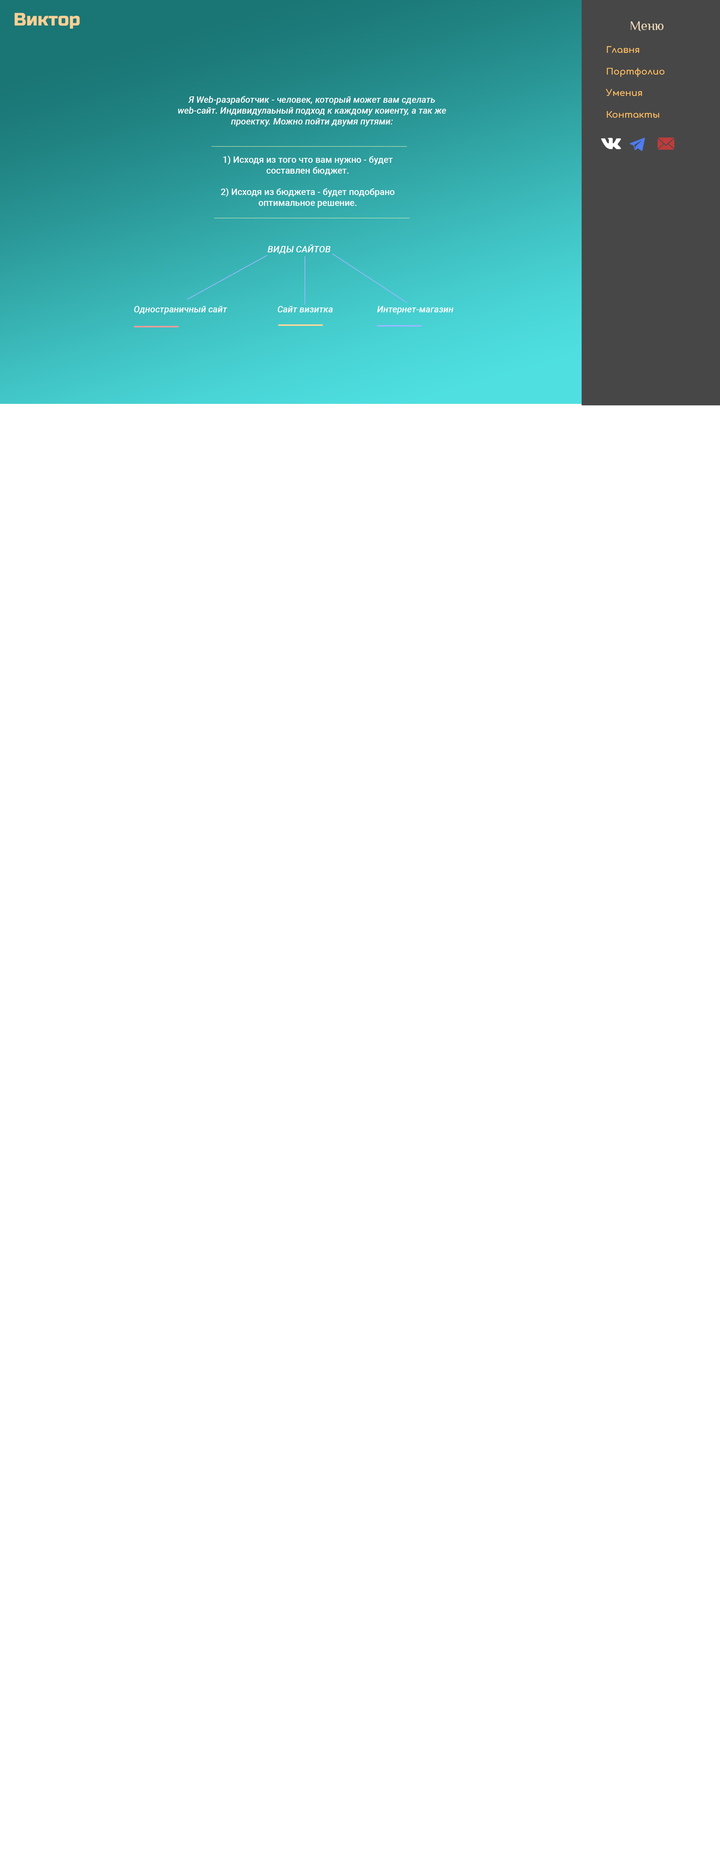
<style>
.page{position:relative;width:720px;height:1875px;background:#ffffff}
.page>*{position:absolute;margin:0}
.t1{font:18px "RussoOne-Regular";color:#fad095}
.t2{font:13.5px "Philosopher-Regular";color:#f2dcbd}
.t3{font:9px "Comfortaa-Bold";color:#ffbe62}
.t4{font:9px "Roboto-MediumItalic";color:#ffffff}
.t5{font:9px "Roboto-Medium";color:#ffffff}
</style>
<div class="page">
<p class="t1" style="left:15px;top:13px;width:65px;height:16px">Виктор</p>
<p class="t2" style="left:631px;top:21px;width:33px;height:10px">Меню</p>
<p class="t3" style="left:606px;top:46px;width:58px;height:72px">Главня<br><br>Портфолио<br><br>Умения<br><br>Контакты</p>
<p class="t4" style="left:178px;top:96px;width:268px;height:30px;text-align:center">Я Web-разработчик - человек, который может вам сделать web-сайт. Индивидулаьный подход к каждому коиенту, а так же проектку. Можно пойти двумя путями:</p>
<p class="t5" style="left:221px;top:156px;width:173px;height:52px;text-align:center">1) Исходя из того что вам нужно - будет составлен бюджет.<br><br>2) Исходя из бюджета - будет подобрано оптимальное решение.</p>
<p class="t4" style="left:267px;top:244px;width:63px;height:10px">ВИДЫ САЙТОВ</p>
<p class="t4" style="left:134px;top:306px;width:94px;height:8px">Одностраничный сайт</p>
<p class="t4" style="left:278px;top:306px;width:55px;height:6px">Сайт визитка</p>
<p class="t4" style="left:377px;top:306px;width:76px;height:8px">Интернет-магазин</p>
</div>
